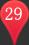
<style>
.page{position:relative;width:29px;height:45px;background:#333333}
.page>*{position:absolute;margin:0}
.t1{font:18px "SimSun";color:#faf7f7}
</style>
<div class="page">
<p class="t1" style="left:5px;top:7px;width:17px;height:13px">29</p>
</div>
